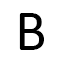
<style>
.page{position:relative;width:64px;height:64px;background:#ffffff}
.page>*{position:absolute;margin:0}
.t1{font:58.3px "Calibri";color:#000000}
</style>
<div class="page">
<p class="t1" style="left:19px;top:13px;width:25px;height:37px">В</p>
</div>
